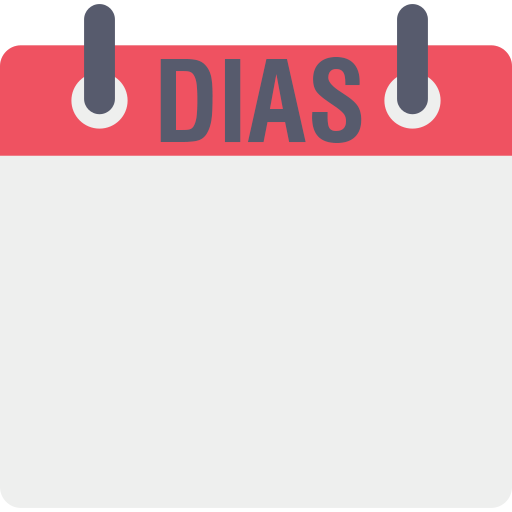
<style>
.page{position:relative;width:512px;height:512px;background:#eeefee}
.page>*{position:absolute;margin:0}
.t1{font:111px "Swiss721BT-BoldCondensed";color:#575b6d}
</style>
<div class="page">
<p class="t1" style="left:160px;top:57px;width:202px;height:86px">DIAS</p>
</div>
